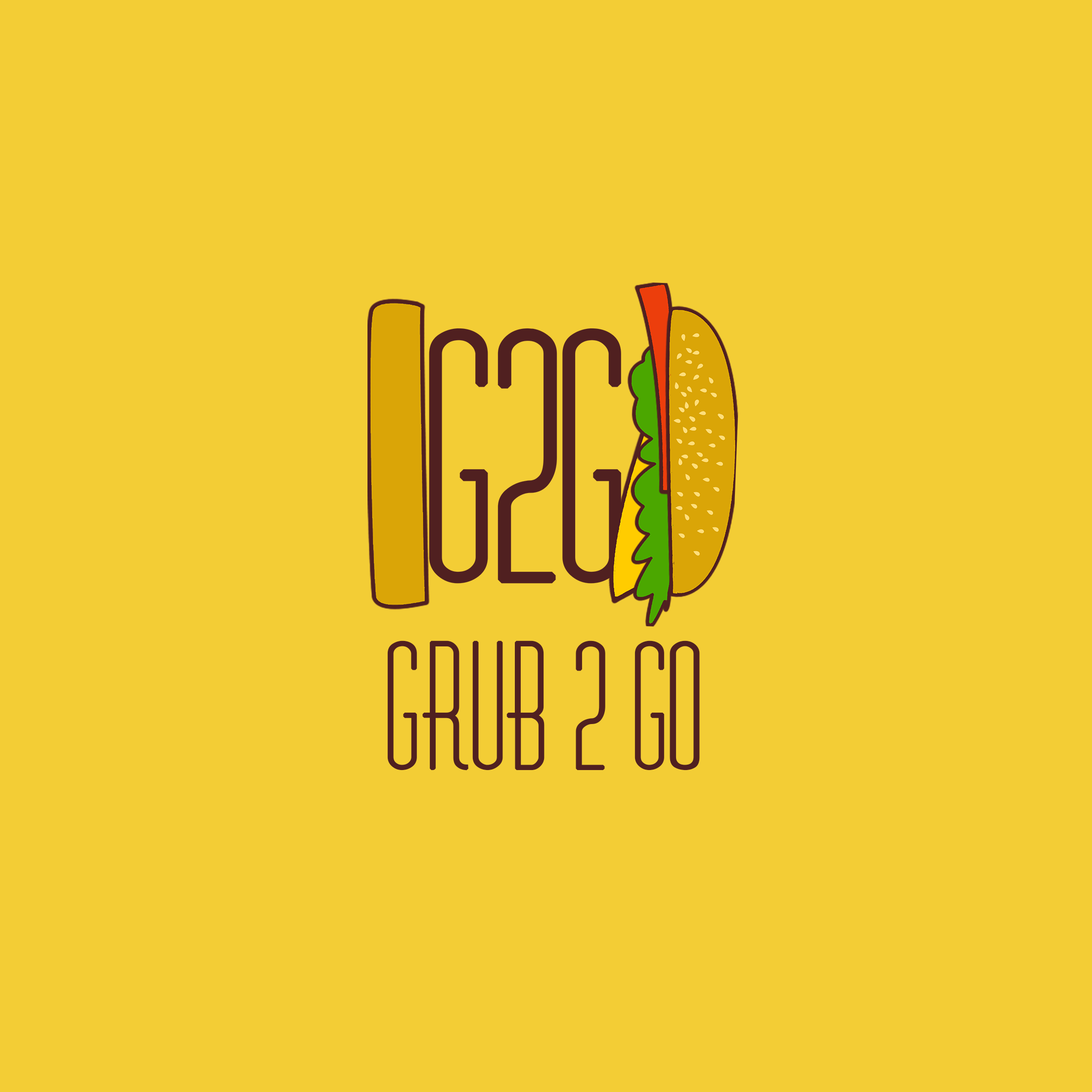
<style>
.page{position:relative;width:1092px;height:1092px;background:#f3cd35}
.page>*{position:absolute;margin:0}
.t1{font:157.9px "Diner-Regular";letter-spacing:-0.005em;color:#502020;font-weight:bold}
</style>
<div class="page">
<p class="t1" style="left:387px;top:640px;width:313px;height:131px">GRUB 2 GO</p>
</div>
